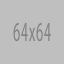
<style>
.page{position:relative;width:64px;height:64px;background:#bfbfbf}
.page>*{position:absolute;margin:0}
.t1{font:27.6px "MyriadPro-Regular";letter-spacing:0.07em;color:#818181;scale:0.5 1}
</style>
<div class="page">
<p class="t1" style="left:13px;top:22px;width:38px;height:20px">64x64</p>
</div>
